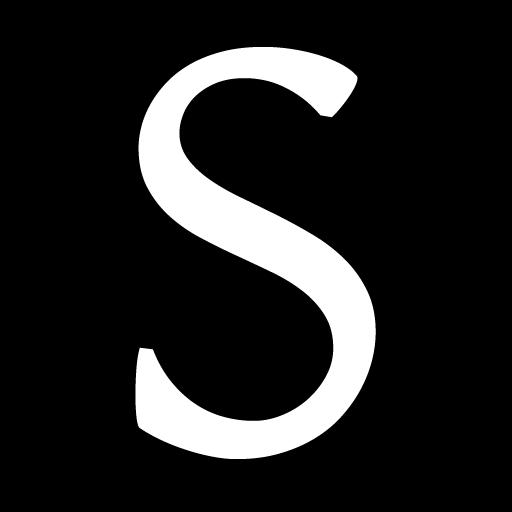
<style>
.page{position:relative;width:512px;height:512px;background:#000000}
.page>*{position:absolute;margin:0}
.t1{font:640px "GentiumBasic";color:#ffffff}
</style>
<div class="page">
<p class="t1" style="left:135px;top:47px;width:241px;height:412px">S</p>
</div>
